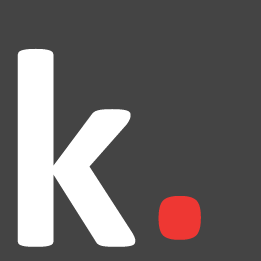
<style>
.page{position:relative;width:261px;height:261px;background:#444444}
.page>*{position:absolute;margin:0}
.t1{font:290px "Calibri-Bold";color:#ffffff}
.t2{font:290px "Calibri-Bold";color:#ee3733}
</style>
<div class="page">
<p class="t1" style="left:17px;top:48px;width:119px;height:199px">k</p>
<p class="t2" style="left:158px;top:196px;width:43px;height:44px">.</p>
</div>
